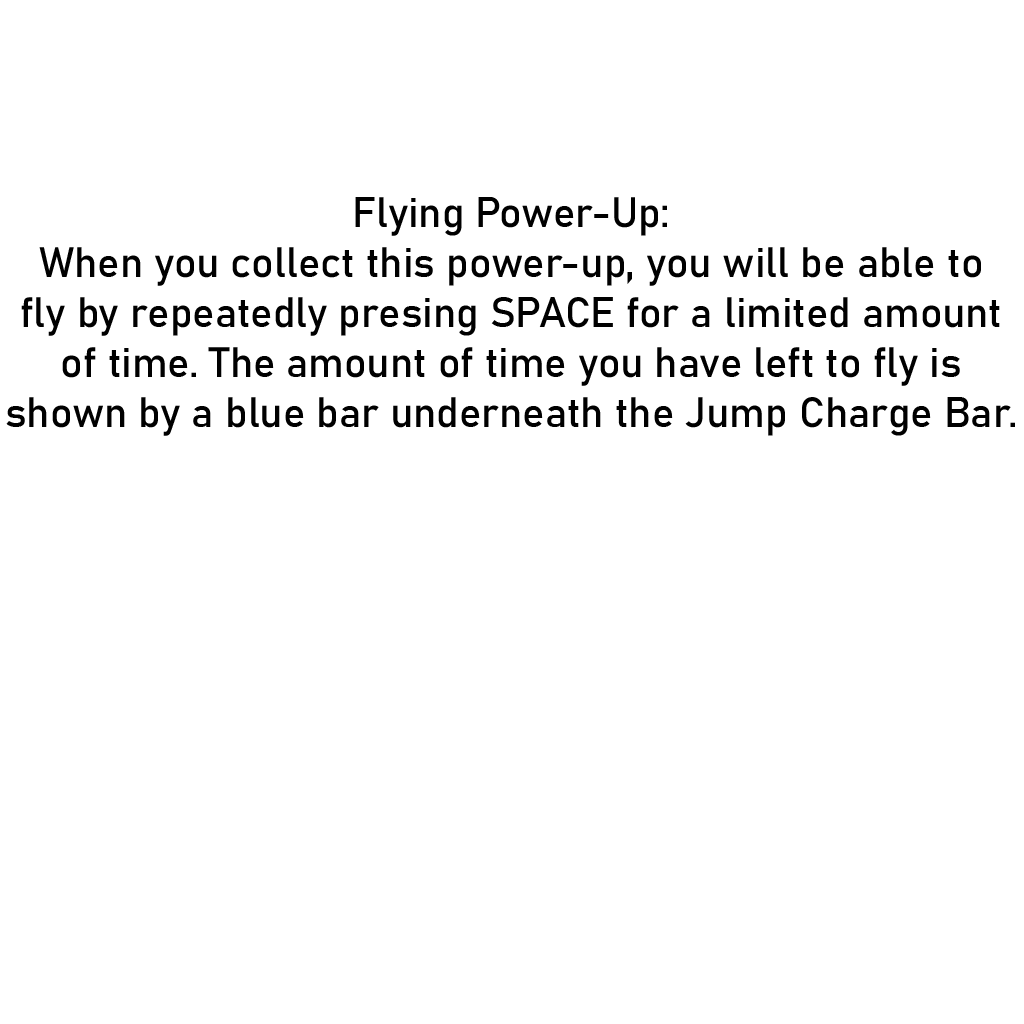
<style>
.page{position:relative;width:1024px;height:1024px;background:#ffffff}
.page>*{position:absolute;margin:0}
.t1{font:41.7px "Bahnschrift";color:#000000}
</style>
<div class="page">
<p class="t1" style="left:6px;top:197px;width:1009px;height:239px;text-align:center">Flying Power-Up:<br>When you collect this power-up, you will be able to<br>fly by repeatedly presing SPACE for a limited amount<br>of time. The amount of time you have left to fly is<br>shown by a blue bar underneath the Jump Charge Bar.</p>
</div>
